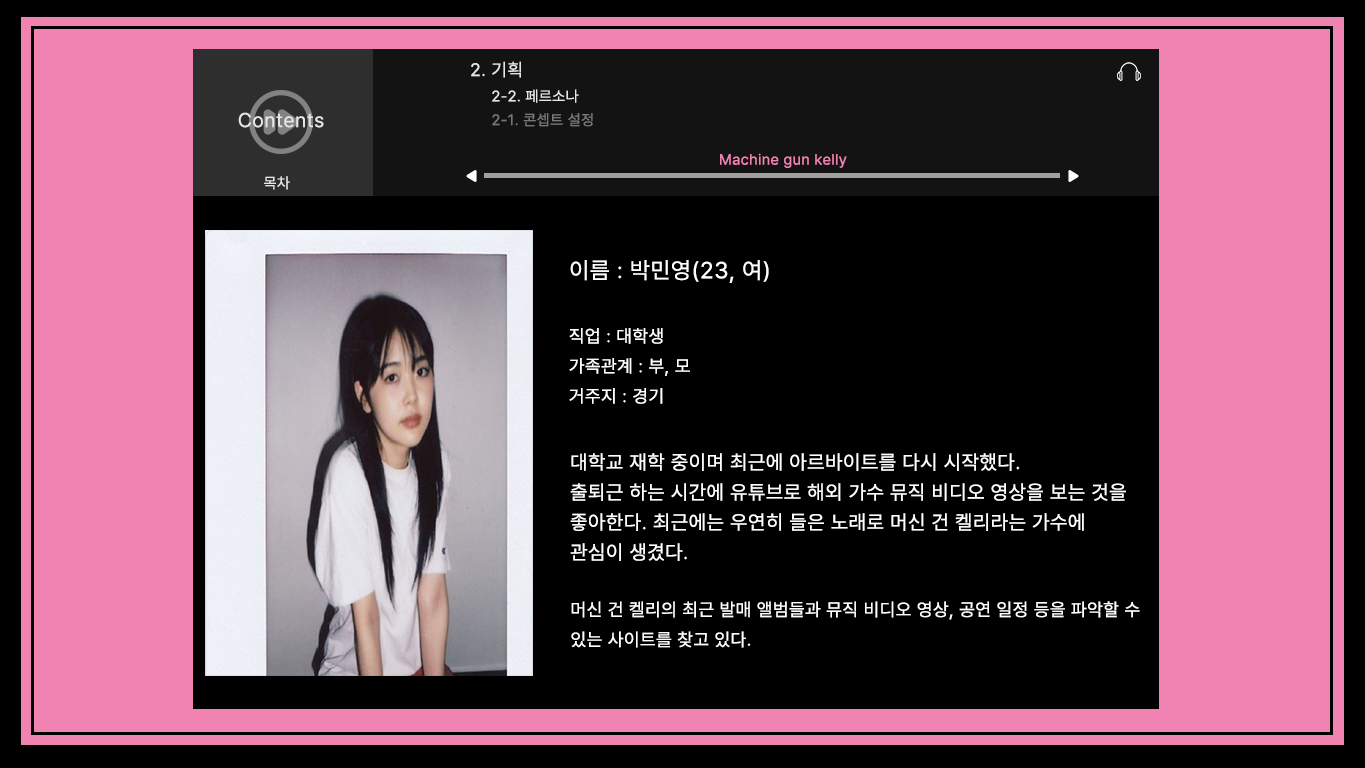
<style>
.page{position:relative;width:1365px;height:768px;background:#000000}
.page>*{position:absolute;margin:0}
.t1{font:18px "Pretendard-Regular";letter-spacing:0.03em;color:#e5e5e5}
.t2{font:15px "Pretendard-Regular";letter-spacing:0.03em;color:#e5e5e5}
.t3{font:20px "Pretendard-Regular";letter-spacing:0.03em;color:#e5e5e5}
.t4{font:15px "Pretendard-Regular";letter-spacing:0.03em;color:#787878}
.t5{font:15px "Pretendard-Regular";letter-spacing:0.03em;color:#f183b2}
.t6{font:23px "Pretendard-Regular";letter-spacing:0.03em;color:#ffffff}
.t7{font:18px/30px "Pretendard-Regular";letter-spacing:0.03em;color:#ffffff}
.t8{font:20px/30px "Pretendard-Regular";letter-spacing:0.03em;color:#ffffff}
</style>
<div class="page">
<p class="t1" style="left:471px;top:61px;width:50px;height:17px">2. 기획</p>
<p class="t2" style="left:492px;top:89px;width:87px;height:14px">2-2. 페르소나</p>
<p class="t3" style="left:238px;top:112px;width:86px;height:16px">Contents</p>
<p class="t4" style="left:492px;top:113px;width:101px;height:14px">2-1. 콘셉트 설정</p>
<p class="t5" style="left:720px;top:153px;width:127px;height:15px">Machine gun kelly</p>
<p class="t2" style="left:264px;top:176px;width:26px;height:14px">목차</p>
<p class="t6" style="left:570px;top:260px;width:199px;height:23px">이름 : 박민영(23, 여)</p>
<p class="t7" style="left:569px;top:328px;width:121px;height:76px">직업 : 대학생<br>가족관계 : 부, 모<br>거주지 : 경기</p>
<p class="t8" style="left:570px;top:453px;width:556px;height:108px">대학교 재학 중이며 최근에 아르바이트를 다시 시작했다.<br>출퇴근 하는 시간에 유튜브로 해외 가수 뮤직 비디오 영상을 보는 것을 <br>좋아한다. 최근에는 우연히 들은 노래로 머신 건 켈리라는 가수에<br>관심이 생겼다.</p>
<p class="t7" style="left:571px;top:601px;width:569px;height:47px">머신 건 켈리의 최근 발매 앨범들과 뮤직 비디오 영상, 공연 일정 등을 파악할 수 <br>있는 사이트를 찾고 있다.</p>
</div>
